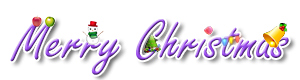
<style>
.page{position:relative;width:300px;height:80px;background:#ffffff}
.page>*{position:absolute;margin:0}
.t1{font:60px "FreestyleScript-Regular"}
</style>
<div class="page">
<p class="t1" style="left:10px;top:17px;width:279px;height:58px">Merry Christmas</p>
</div>
